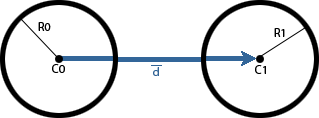
<style>
.page{position:relative;width:319px;height:118px;background:#ffffff}
.page>*{position:absolute;margin:0}
.t1{font:12px "MyriadPro-Regular";color:#000000}
.t2{font:12px "MyriadPro-Regular";color:#326496}
</style>
<div class="page">
<p class="t1" style="left:38px;top:22px;width:13px;height:9px">R0</p>
<p class="t1" style="left:274px;top:28px;width:11px;height:9px">R1</p>
<p class="t1" style="left:52px;top:64px;width:13px;height:9px">C0</p>
<p class="t1" style="left:255px;top:65px;width:11px;height:9px">C1</p>
<p class="t2" style="left:153px;top:67px;width:6px;height:9px">d</p>
</div>
